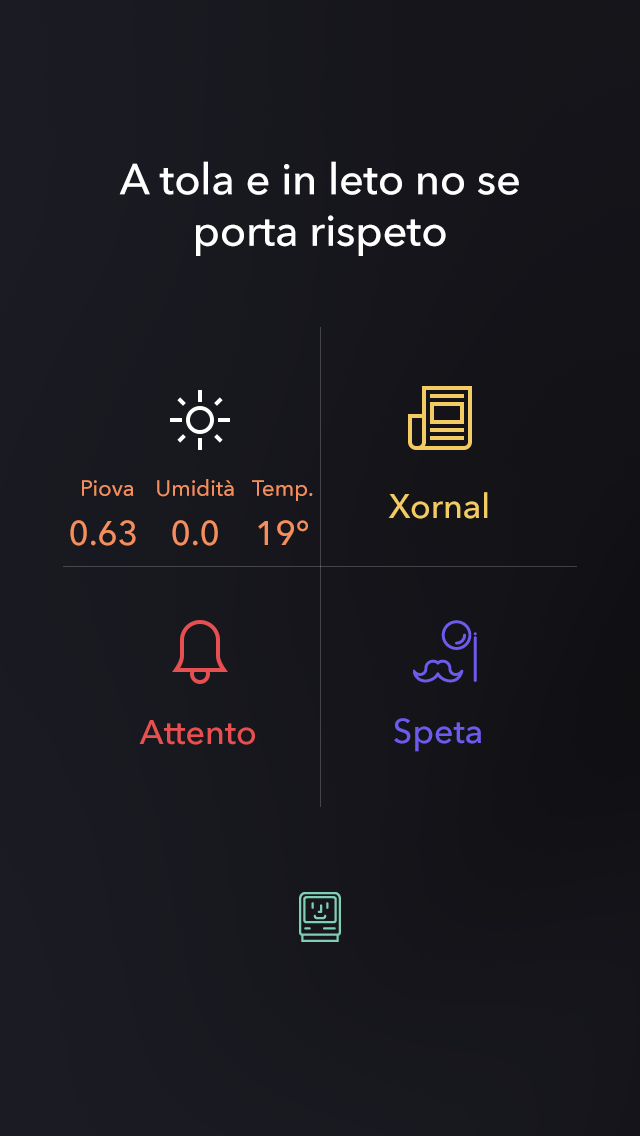
<style>
.page{position:relative;width:640px;height:1136px}
.page>*{position:absolute;margin:0}
.t1{font:43px "AvenirNext-Medium";color:#ffffff}
.t2{font:22px "AvenirNext-Medium";color:#f48e5c}
.t3{font:34px "AvenirNext-Medium";color:#f2cb63}
.t4{font:34px "AvenirNext-Medium";color:#f48e5c}
.t5{font:34px "AvenirNext-Medium";color:#e65050}
.t6{font:34px "AvenirNext-Medium";color:#6c5bec}
</style>
<div class="page">
<p class="t1" style="left:119px;top:161px;width:400px;height:95px;text-align:center">A tola e in leto no se porta rispeto</p>
<p class="t2" style="left:82px;top:480px;width:52px;height:16px">Piova</p>
<p class="t2" style="left:157px;top:479px;width:77px;height:18px">Umidità</p>
<p class="t2" style="left:252px;top:480px;width:61px;height:21px">Temp.</p>
<p class="t3" style="left:388px;top:492px;width:100px;height:27px">Xornal</p>
<p class="t4" style="left:70px;top:520px;width:66px;height:26px">0.63</p>
<p class="t4" style="left:172px;top:520px;width:46px;height:26px">0.0</p>
<p class="t4" style="left:258px;top:520px;width:50px;height:25px">19°</p>
<p class="t5" style="left:139px;top:720px;width:116px;height:25px">Attento</p>
<p class="t6" style="left:394px;top:718px;width:87px;height:34px">Speta</p>
</div>
